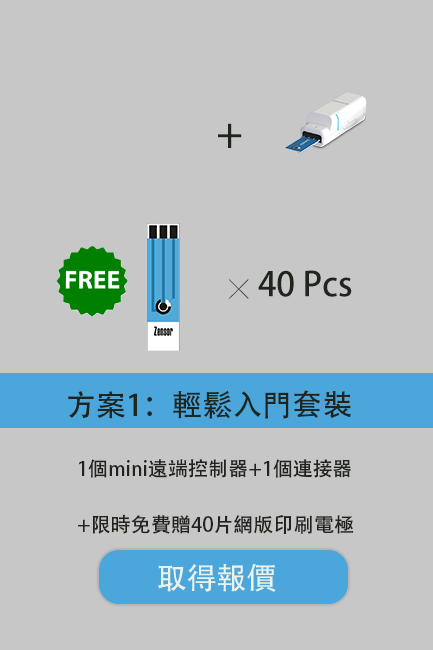
<style>
.page{position:relative;width:433px;height:650px;background:#c7c7c7}
.page>*{position:absolute;margin:0}
.t1{font:40px "AdobeHeitiStd-Regular";color:#1f241c}
.t2{font:33.3px "AdobeHeitiStd-Regular";color:#1f241c}
.t3{font:20px "SimHei";color:#1f241c}
.t4{font:30px "AdobeHeitiStd-Regular";color:#1f241c}
.t5{font:20px/55.5px "AdobeHeitiStd-Regular";color:#1f241c}
.t6{font:30px "AdobeHeitiStd-Regular";color:#ebf2e7}
</style>
<div class="page">
<p class="t1" style="left:218px;top:123px;width:24px;height:25px">＋</p>
<p class="t2" style="left:228px;top:270px;width:124px;height:29px"><span class="t3">╳  </span>40 Pcs</p>
<p class="t4" style="left:68px;top:390px;width:284px;height:29px">方案1：輕鬆入門套裝</p>
<p class="t5" style="left:78px;top:459px;width:276px;height:75px">1個mini遠端控制器+1個連接器<br>+限時免費贈40片網版印刷電極</p>
<p class="t6" style="left:158px;top:563px;width:118px;height:29px">取得報價</p>
</div>
